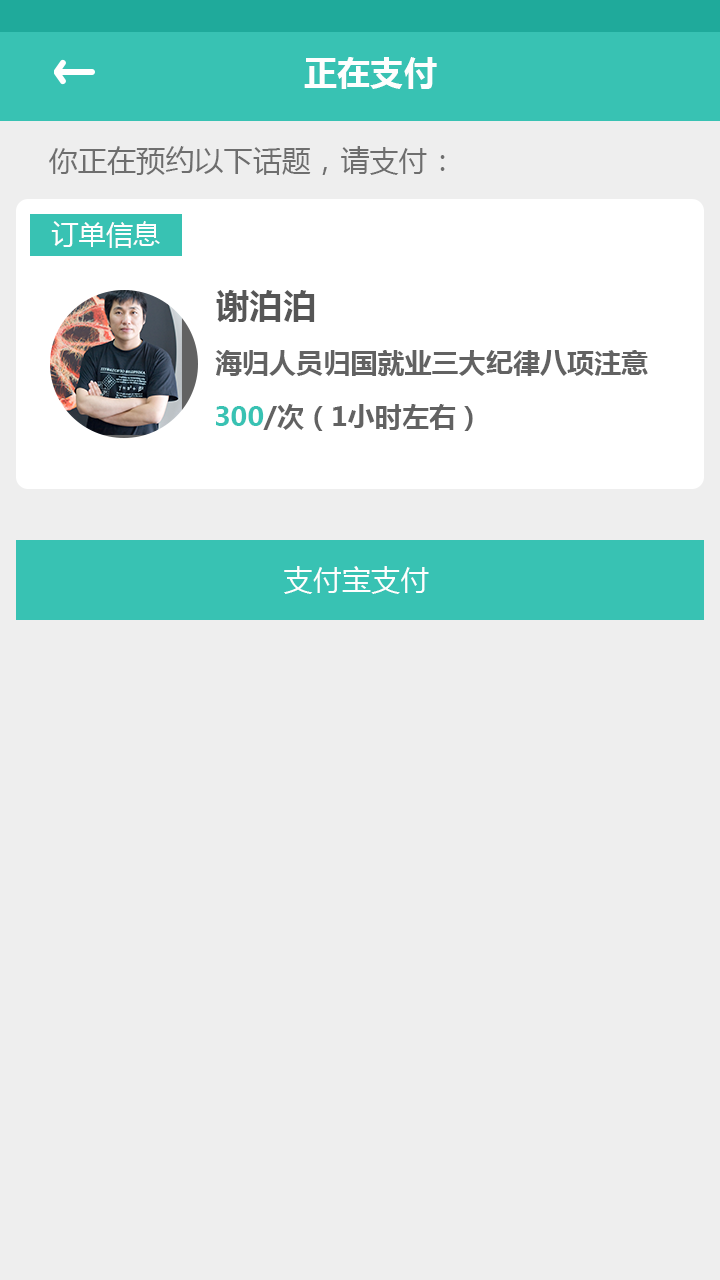
<style>
.page{position:relative;width:720px;height:1280px;background:#eeeeee}
.page>*{position:absolute;margin:0}
.t1{font:33.3px "MicrosoftYaHei-Bold";color:#fefefe}
.t2{font:29.2px "MicrosoftYaHei";color:#6e6e6e}
.t3{font:27.1px "MicrosoftYaHei";color:#fefefe}
.t4{font:33.3px "MicrosoftYaHei-Bold";color:#565656}
.t5{font:27.1px "MicrosoftYaHei-Bold";color:#626262}
.t6{font:27.1px "MicrosoftYaHei-Bold";color:#38c2b3}
.t7{font:29.2px "MicrosoftYaHei";color:#fefefe}
</style>
<div class="page">
<p class="t1" style="left:304px;top:57px;width:133px;height:32px">正在支付</p>
<p class="t2" style="left:49px;top:146px;width:396px;height:29px">你正在预约以下话题，请支付：</p>
<p class="t3" style="left:51px;top:221px;width:109px;height:27px">订单信息</p>
<p class="t4" style="left:216px;top:290px;width:99px;height:32px">谢泊泊</p>
<p class="t5" style="left:215px;top:350px;width:433px;height:26px">海归人员归国就业三大纪律八项注意</p>
<p class="t5" style="left:216px;top:404px;width:257px;height:27px"><span class="t6">300</span>/次（1小时左右）</p>
<p class="t7" style="left:284px;top:566px;width:145px;height:28px">支付宝支付</p>
</div>
